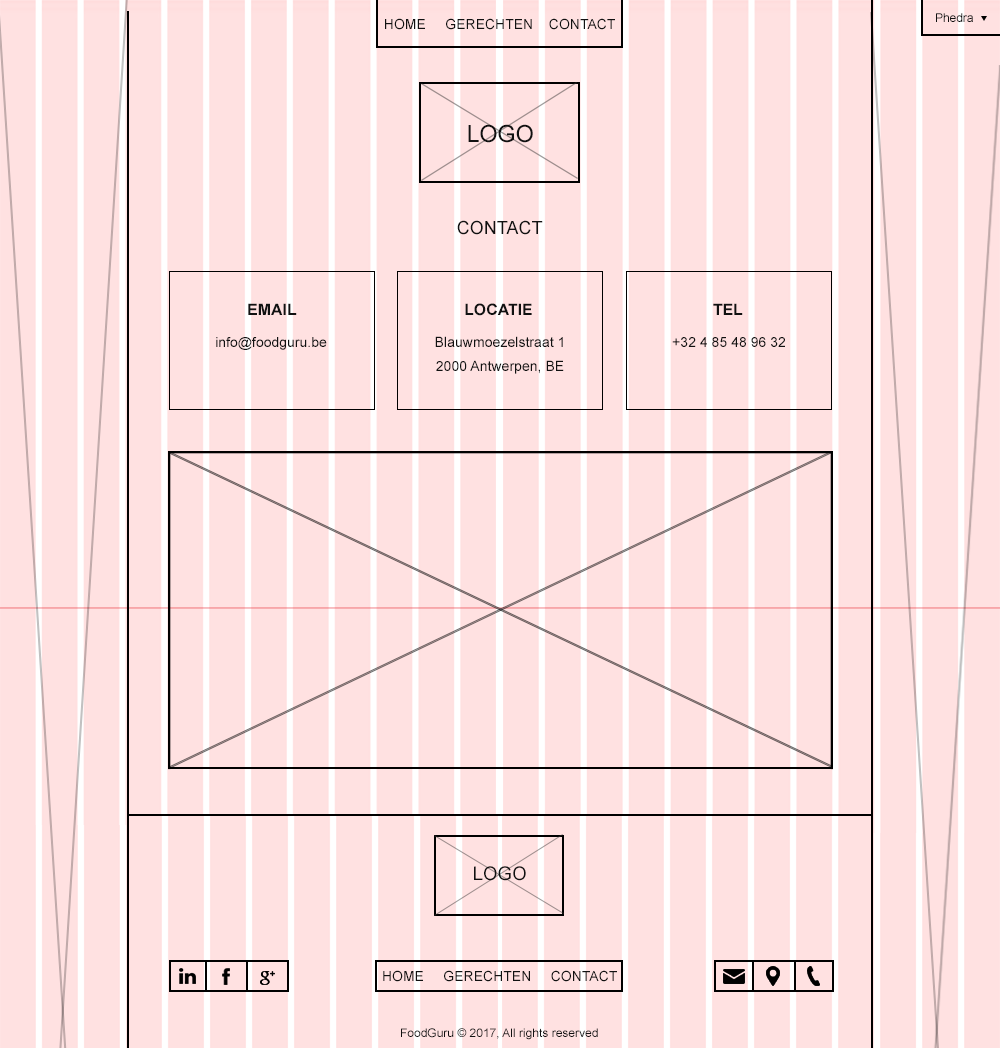
<style>
.page{position:relative;width:1000px;height:1048px;background:#ffe1e1}
.page>*{position:absolute;margin:0}
.t1{font:12px "ArialMT";color:#111111}
.t2{font:14px "ArialMT";color:#111111}
.t3{font:23.5px "ArialMT";color:#111111}
.t4{font:18px "ArialMT";color:#111111}
.t5{font:15.7px "Arial-BoldMT";color:#111111}
.t6{font:14.4px/24px "ArialMT";color:#111111}
.t7{font:14.4px "ArialMT";color:#111111}
</style>
<div class="page">
<p class="t1" style="left:936px;top:13px;width:37px;height:9px">Phedra</p>
<p class="t2" style="left:385px;top:18px;width:230px;height:12px">HOME     GERECHTEN    CONTACT</p>
<p class="t3" style="left:468px;top:124px;width:65px;height:19px">LOGO</p>
<p class="t4" style="left:457px;top:220px;width:86px;height:15px">CONTACT</p>
<p class="t5" style="left:248px;top:303px;width:49px;height:12px">EMAIL</p>
<p class="t5" style="left:465px;top:303px;width:67px;height:13px">LOCATIE</p>
<p class="t5" style="left:713px;top:303px;width:30px;height:12px">TEL</p>
<p class="t2" style="left:216px;top:337px;width:111px;height:13px">info@foodguru.be</p>
<p class="t6" style="left:435px;top:336px;width:129px;height:38px;text-align:center">Blauwmoezelstraat 1<br>2000 Antwerpen, BE</p>
<p class="t7" style="left:672px;top:337px;width:113px;height:10px">+32 4 85 48 96 32</p>
</div>
